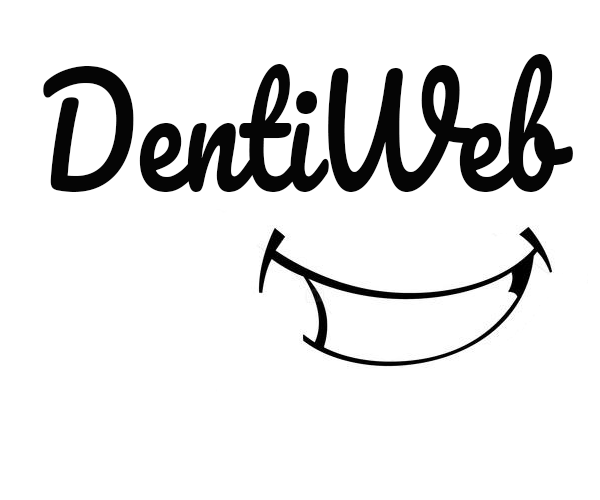
<style>
.page{position:relative;width:600px;height:500px;background:#ffffff}
.page>*{position:absolute;margin:0}
.t1{font:144.6px "Pacifico-Regular";color:#050505;scale:0.81 1}
</style>
<div class="page">
<p class="t1" style="left:43px;top:53px;width:530px;height:139px">DentiWeb</p>
</div>
